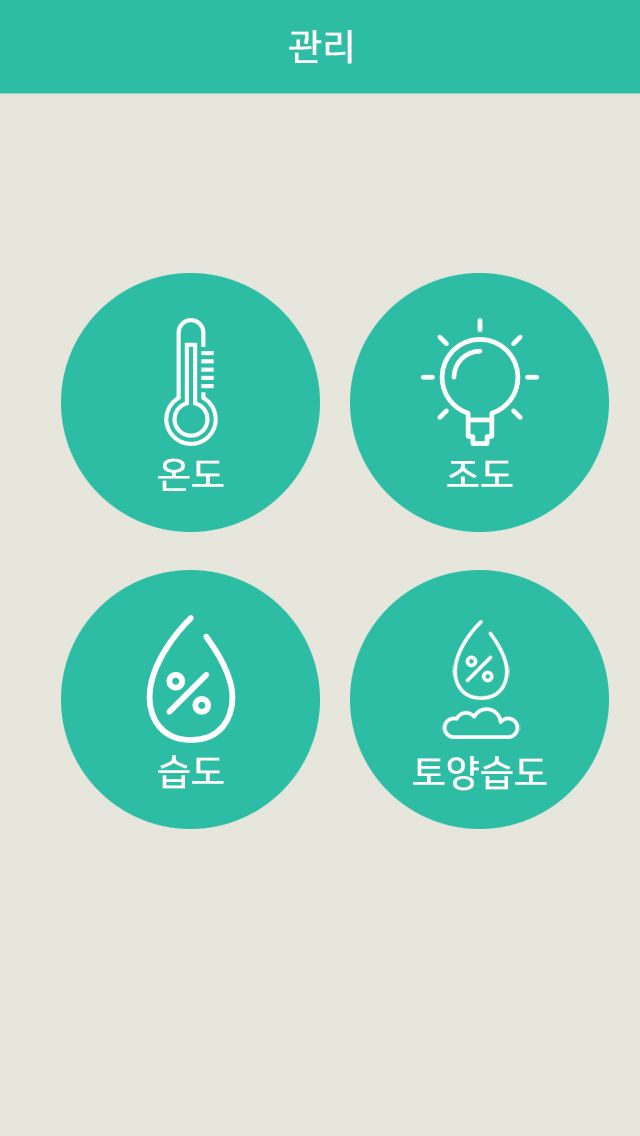
<style>
.page{position:relative;width:640px;height:1136px;background:#e6e6dc}
.page>*{position:absolute;margin:0}
.t1{font:36px "NanumSquareR";color:#ffffff;font-weight:bold}
</style>
<div class="page">
<p class="t1" style="left:289px;top:30px;width:63px;height:34px">관리</p>
<p class="t1" style="left:158px;top:458px;width:66px;height:33px">온도</p>
<p class="t1" style="left:447px;top:460px;width:66px;height:27px">조도</p>
<p class="t1" style="left:158px;top:755px;width:66px;height:34px">습도</p>
<p class="t1" style="left:413px;top:756px;width:134px;height:35px">토양습도</p>
</div>
